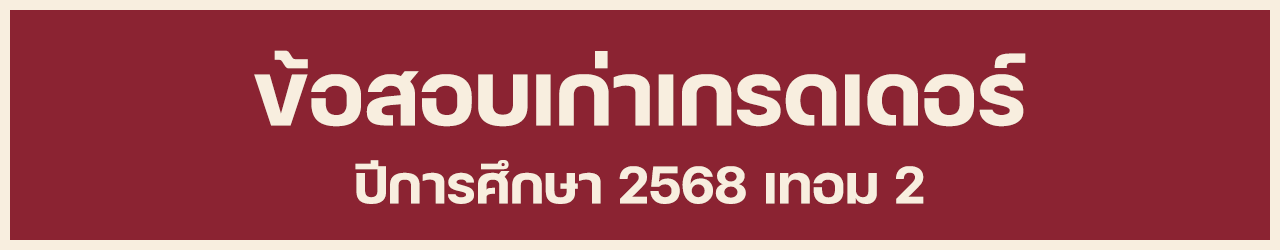
<style>
.page{position:relative;width:1280px;height:250px;background:#8b2332}
.page>*{position:absolute;margin:0}
.t1{font:120px "FCMinimalBold";color:#f8eedf}
.t2{font:72px "FCMinimalBold";color:#f8eedf}
</style>
<div class="page">
<p class="t1" style="left:254px;top:50px;width:772px;height:77px">ข้อสอบเก่าเกรดเดอร์</p>
<p class="t2" style="left:355px;top:160px;width:569px;height:44px">ปีการศึกษา 2568 เทอม 2</p>
</div>
